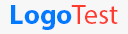
<style>
.page{position:relative;width:128px;height:34px;background:#f7f7f8}
.page>*{position:absolute;margin:0}
.t1{font:27.9px "MyriadPro-Bold";color:#007aff}
.t2{font:27.9px "MyriadPro-Regular";color:#ff3b30}
</style>
<div class="page">
<p class="t1" style="left:11px;top:5px;width:107px;height:25px">Logo<span class="t2">Test</span></p>
</div>
